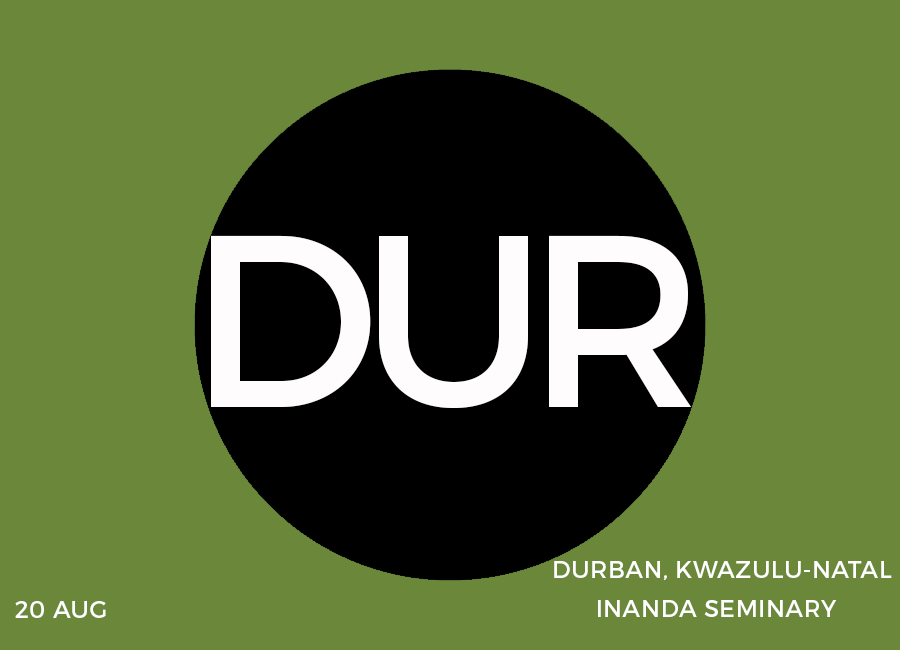
<style>
.page{position:relative;width:900px;height:650px;background:#6b883a}
.page>*{position:absolute;margin:0}
.t1{font:24px "Montserrat-Regular";letter-spacing:0.02em;color:#ffffff}
</style>
<div class="page">
<p class="t1" style="left:554px;top:561px;width:338px;height:19px">DURBAN, KWAZULU-NATAL</p>
<p class="t1" style="left:15px;top:601px;width:91px;height:17px">20 AUG</p>
<p class="t1" style="left:598px;top:600px;width:239px;height:17px">INANDA SEMINARY</p>
</div>
